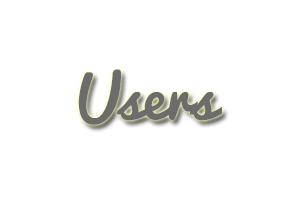
<style>
.page{position:relative;width:300px;height:200px;background:#ffffff}
.page>*{position:absolute;margin:0}
.t1{font:60px "Pacifico-Regular";color:#6c6c6c}
</style>
<div class="page">
<p class="t1" style="left:78px;top:69px;width:144px;height:56px">Users</p>
</div>
